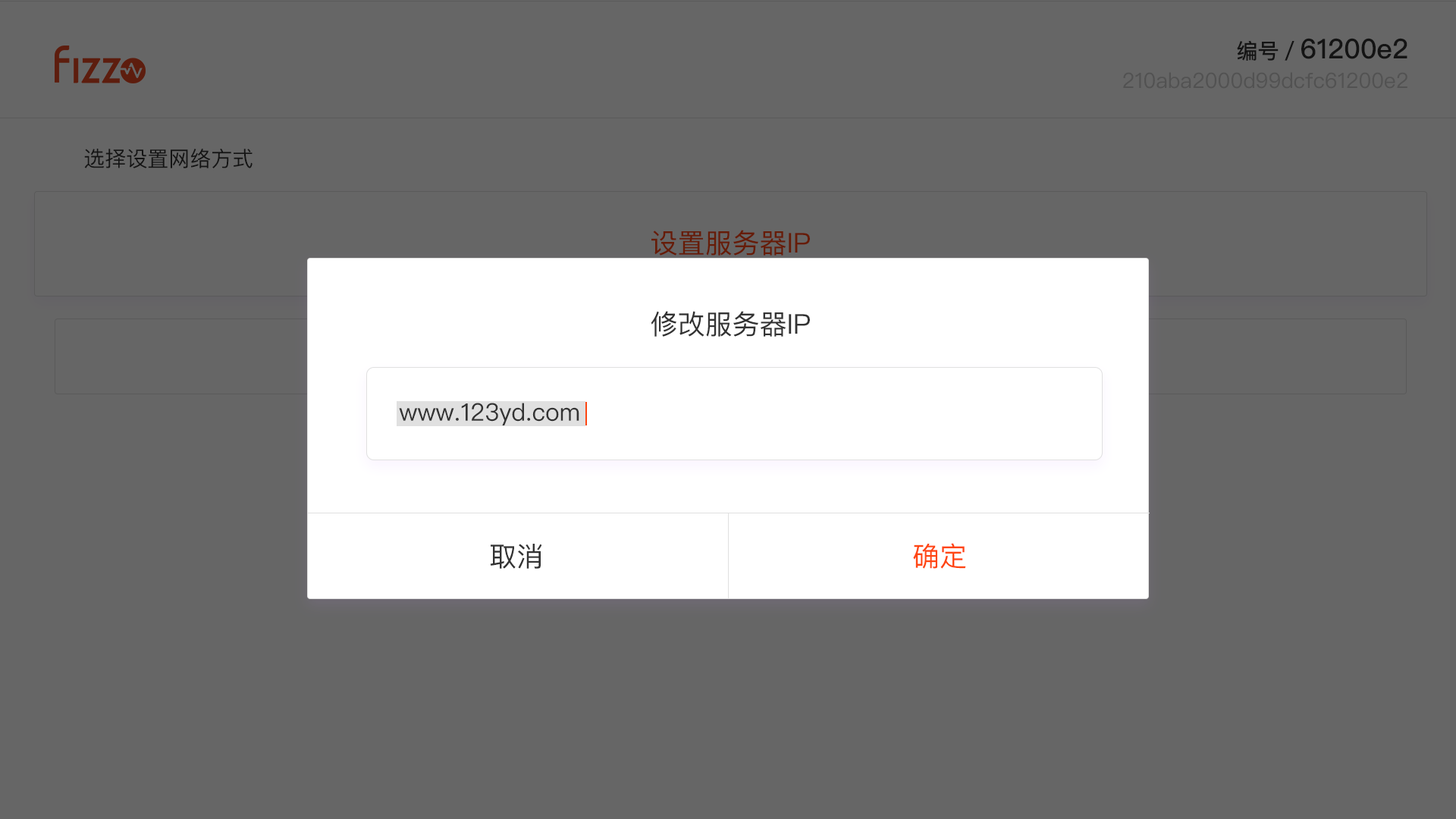
<style>
.page{position:relative;width:1456px;height:819px;background:#666666}
.page>*{position:absolute;margin:0}
.t1{font:27.3px "PingFangSC-Medium";color:#141414}
.t2{font:21.2px "PingFangSC-Medium";color:#141414}
.t3{font:21.2px "PingFangSC-Regular";color:#525252}
.t4{font:21.2px "PingFangSC-Regular";color:#141414}
.t5{font:27.3px "PingFangSC-Regular";color:#661c07}
.t6{font:27.3px "PingFangSC-Regular";color:#333333}
.t7{font:24.3px "PingFangSC-Regular";color:#333333}
.t8{font:27.3px "PingFangSC-Regular";color:#ff4612}
</style>
<div class="page">
<p class="t1" style="left:1237px;top:38px;width:170px;height:23px"><span class="t2">编号／</span>61200e2</p>
<p class="t3" style="left:1123px;top:72px;width:284px;height:17px">210aba2000d99dcfc61200e2</p>
<p class="t4" style="left:84px;top:149px;width:169px;height:19px">选择设置网络方式</p>
<p class="t5" style="left:651px;top:230px;width:159px;height:26px">设置服务器IP</p>
<p class="t6" style="left:651px;top:311px;width:159px;height:26px">修改服务器IP</p>
<p class="t7" style="left:399px;top:403px;width:180px;height:23px">www.123yd.com</p>
<p class="t6" style="left:490px;top:544px;width:52px;height:25px">取消</p>
<p class="t8" style="left:913px;top:543px;width:53px;height:26px">确定</p>
</div>
